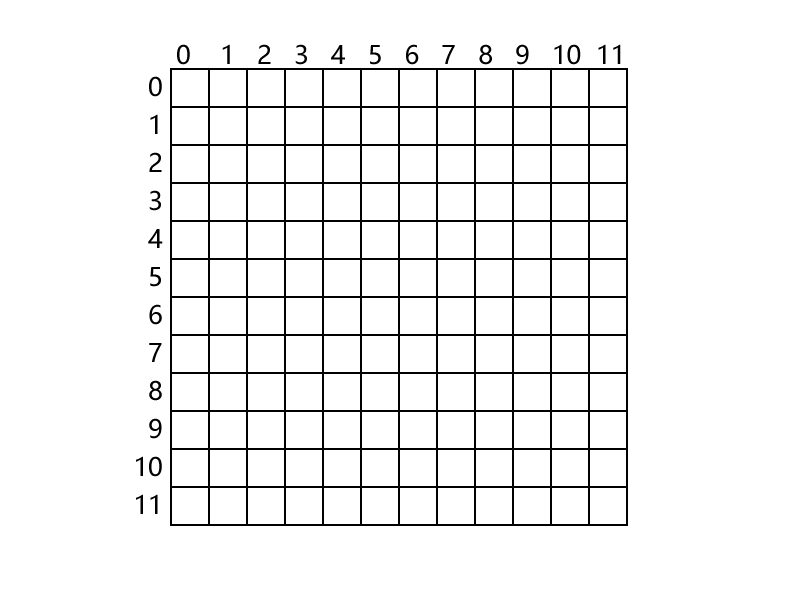
<style>
.page{position:relative;width:800px;height:600px;background:#ffffff}
.page>*{position:absolute;margin:0}
.t1{font:25px "MicrosoftYaHei";color:#010101}
.t2{font:25px/38px "MicrosoftYaHei";color:#000000}
</style>
<div class="page">
<p class="t1" style="left:177px;top:44px;width:444px;height:21px">0    1   2   3   4   5   6   7   8   9   10  11</p>
<p class="t2" style="left:136px;top:76px;width:27px;height:438px;text-align:right">0<br>1<br>2<br>3<br>4<br>5<br>6<br>7<br>8<br>9<br>10<br>11</p>
</div>
